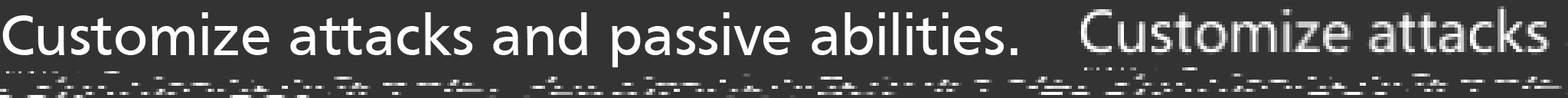
<style>
.page{position:relative;width:1568px;height:98px;background:#333333}
.page>*{position:absolute;margin:0}
.t1{font:59.8px "Frutiger";color:#ffffff}
</style>
<div class="page">
<p class="t1" style="left:2px;top:12px;width:1016px;height:55px">Customize attacks and passive abilities.</p>
</div>
